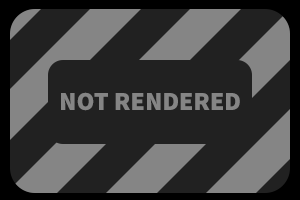
<style>
.page{position:relative;width:300px;height:200px;background:#212121}
.page>*{position:absolute;margin:0}
.t1{font:26px "SourceSansPro-Black";color:#858585;text-transform:uppercase}
</style>
<div class="page">
<p class="t1" style="left:61px;top:92px;width:179px;height:19px">NOT RENDERED</p>
</div>
